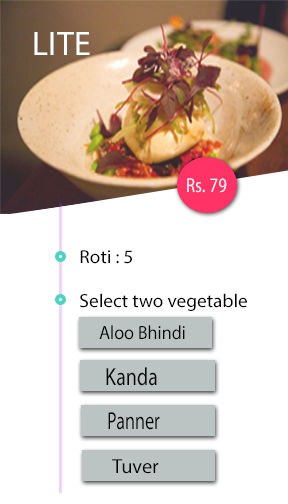
<style>
.page{position:relative;width:288px;height:504px;background:#ffffff}
.page>*{position:absolute;margin:0}
.t1{font:34px "MyriadPro-Regular";letter-spacing:0.015em;color:#ffffff}
.t2{font:20.2px "MyriadPro-Regular";letter-spacing:0.015em;color:#ffffff;scale:0.82 1}
.t3{font:18.8px "MyriadPro-Regular";color:#000000}
.t4{font:19.3px "MyriadPro-Regular";color:#070707;scale:0.93 1}
.t5{font:24.8px "MyriadPro-Regular";color:#060606;scale:0.81 1}
.t6{font:24.8px "MyriadPro-Regular";color:#040404;scale:0.73 1}
.t7{font:20.2px "MyriadPro-Regular";color:#030303}
</style>
<div class="page">
<p class="t1" style="left:34px;top:32px;width:56px;height:23px">LITE</p>
<p class="t2" style="left:187px;top:178px;width:40px;height:15px">Rs. 79</p>
<p class="t3" style="left:80px;top:250px;width:52px;height:14px">Roti : 5</p>
<p class="t3" style="left:80px;top:293px;width:167px;height:18px">Select two vegetable</p>
<p class="t4" style="left:99px;top:325px;width:86px;height:15px">Aloo Bhindi</p>
<p class="t5" style="left:106px;top:367px;width:51px;height:19px">Kanda</p>
<p class="t6" style="left:108px;top:412px;width:52px;height:18px">Panner</p>
<p class="t7" style="left:112px;top:459px;width:47px;height:15px">Tuver</p>
</div>
